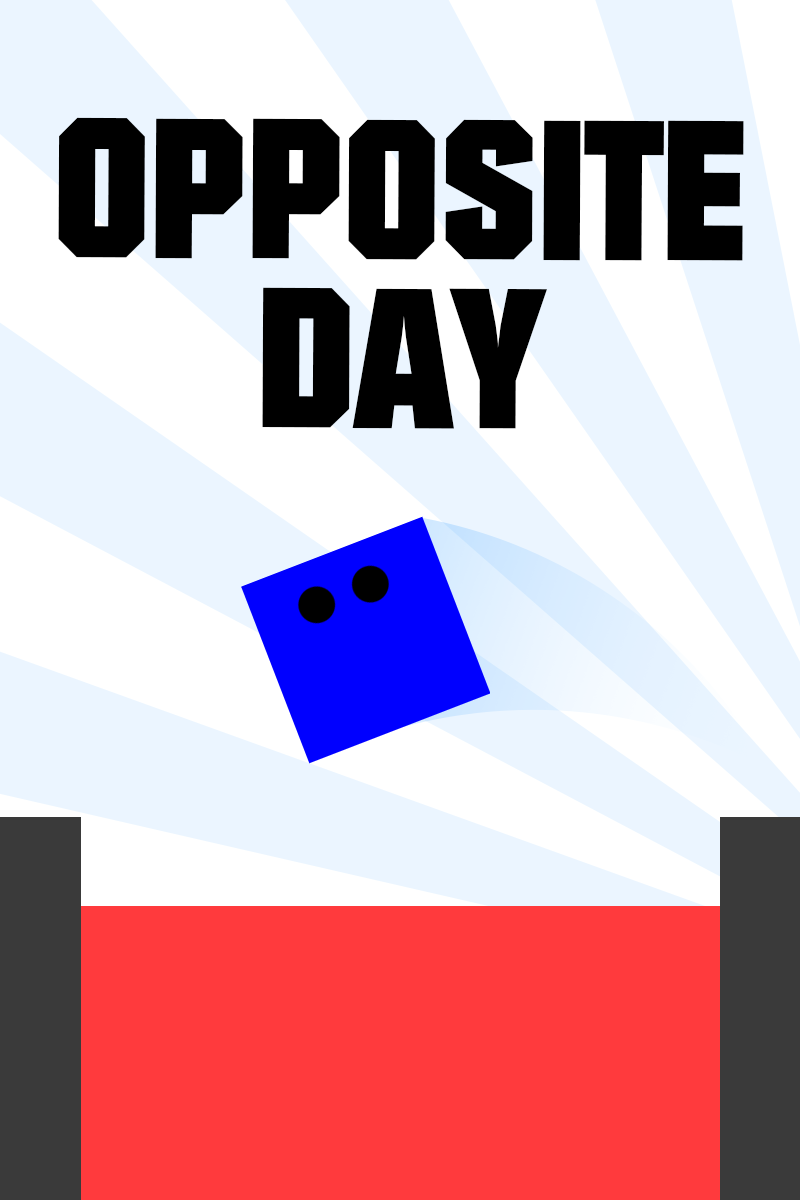
<style>
.page{position:relative;width:800px;height:1200px;background:#ebf5ff}
.page>*{position:absolute;margin:0}
.t1{font:193.3px/169.1px "Autumn";color:#000000}
</style>
<div class="page">
<p class="t1" style="left:58px;top:117px;width:686px;height:312px;text-align:center">OPPOSITE<br>DAY</p>
</div>
